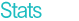
<style>
.page{position:relative;width:79px;height:21px;background:#ffffff}
.page>*{position:absolute;margin:0}
.t1{font:20px "GothicMB101Pro-Regular";letter-spacing:-0.06em;color:#1dbcc0;scale:0.9 1}
</style>
<div class="page">
<p class="t1" style="left:0px;top:1px;width:42px;height:17px">Stats</p>
</div>
